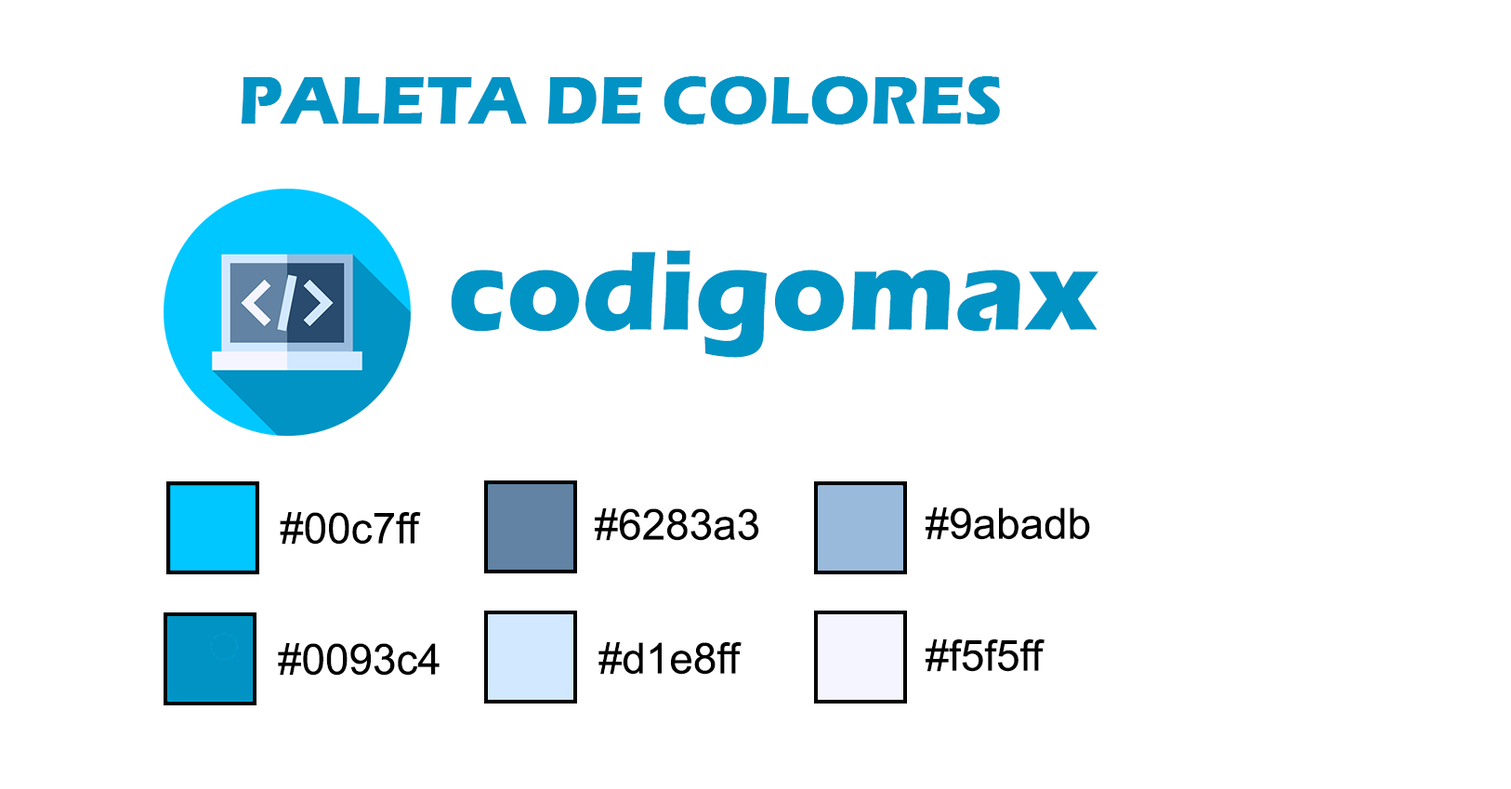
<style>
.page{position:relative;width:1511px;height:789px;background:#ffffff}
.page>*{position:absolute;margin:0}
.t1{font:69.7px "ErasITC-Bold";color:#0093c4}
.t2{font:116.2px "ErasITC-Bold";color:#0093c4}
.t3{font:42.6px "ArialMT";color:#000000}
</style>
<div class="page">
<p class="t1" style="left:241px;top:76px;width:759px;height:49px">PALETA DE COLORES</p>
<p class="t2" style="left:451px;top:250px;width:648px;height:108px">codigomax</p>
<p class="t3" style="left:595px;top:508px;width:164px;height:33px">#6283a3</p>
<p class="t3" style="left:926px;top:507px;width:164px;height:33px">#9abadb</p>
<p class="t3" style="left:280px;top:512px;width:141px;height:33px">#00c7ff</p>
<p class="t3" style="left:926px;top:639px;width:119px;height:33px">#f5f5ff</p>
<p class="t3" style="left:278px;top:643px;width:162px;height:33px">#0093c4</p>
<p class="t3" style="left:599px;top:642px;width:143px;height:33px">#d1e8ff</p>
</div>
